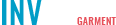
<style>
.page{position:relative;width:116px;height:25px;background:#ffffff}
.page>*{position:absolute;margin:0}
.t1{font:30px "Oswald-Medium";letter-spacing:0.03em;color:#009dc7;text-transform:uppercase}
.t2{font:30px "Oswald-Medium";letter-spacing:0.03em;color:#ffffff;text-transform:uppercase}
.t3{font:10px "Oswald-Medium";letter-spacing:0.03em;color:#e7505a;text-transform:uppercase}
</style>
<div class="page">
<p class="t1" style="left:2px;top:0px;width:74px;height:25px">Inv<span class="t2">Bc</span></p>
<p class="t3" style="left:77px;top:17px;width:39px;height:8px">garment</p>
</div>
